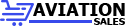
<style>
.page{position:relative;width:126px;height:26px;background:#ffffff}
.page>*{position:absolute;margin:0}
.t1{font:18px "Tahoma-Bold";color:#000000}
.t2{font:10px "Tahoma-Bold";color:#000000}
</style>
<div class="page">
<p class="t1" style="left:33px;top:3px;width:92px;height:13px">AVIATION</p>
<p class="t2" style="left:94px;top:18px;width:31px;height:7px">SALES</p>
</div>
